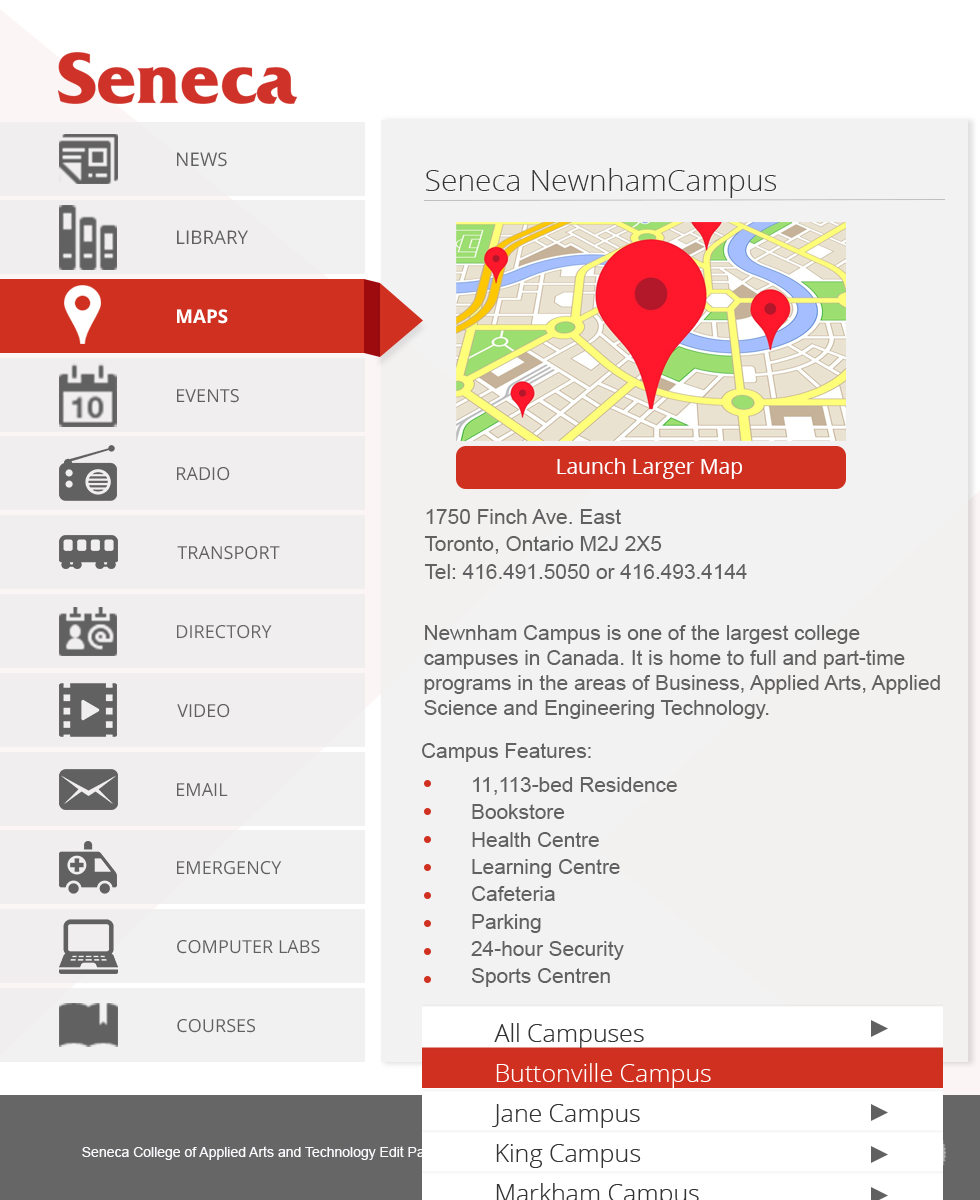
<style>
.page{position:relative;width:980px;height:1200px;background:#f3f2f2}
.page>*{position:absolute;margin:0}
.t1{font:30px "OpenSans-Light";color:#333333}
.t2{font:20.8px "OpenSans";color:#ffffff}
.t3{font:20.8px/25px "ArialMT";color:#616161}
.t4{font:20.8px "ArialMT";color:#616161}
</style>
<div class="page">
<p class="t1" style="left:426px;top:168px;width:351px;height:30px">Seneca NewnhamCampus</p>
<p class="t2" style="left:557px;top:458px;width:185px;height:21px">Launch Larger Map</p>
<p class="t3" style="left:424px;top:509px;width:323px;height:70px">1750 Finch Ave. East<br>Toronto, Ontario M2J 2X5<br>Tel: 416.491.5050 or 416.493.4144</p>
<p class="t3" style="left:424px;top:625px;width:516px;height:94px">Newnham Campus is one of the largest college campuses in Canada. It is home to full and part-time programs in the areas of Business, Applied Arts, Applied Science and Engineering Technology.</p>
<p class="t4" style="left:422px;top:743px;width:169px;height:19px">Campus Features:</p>
<p class="t3" style="left:471px;top:777px;width:206px;height:210px">11,113-bed Residence<br>   Bookstore<br>   Health Centre<br>   Learning Centre<br>   Cafeteria<br>   Parking<br>   24-hour Security<br>   Sports Centren</p>
</div>
